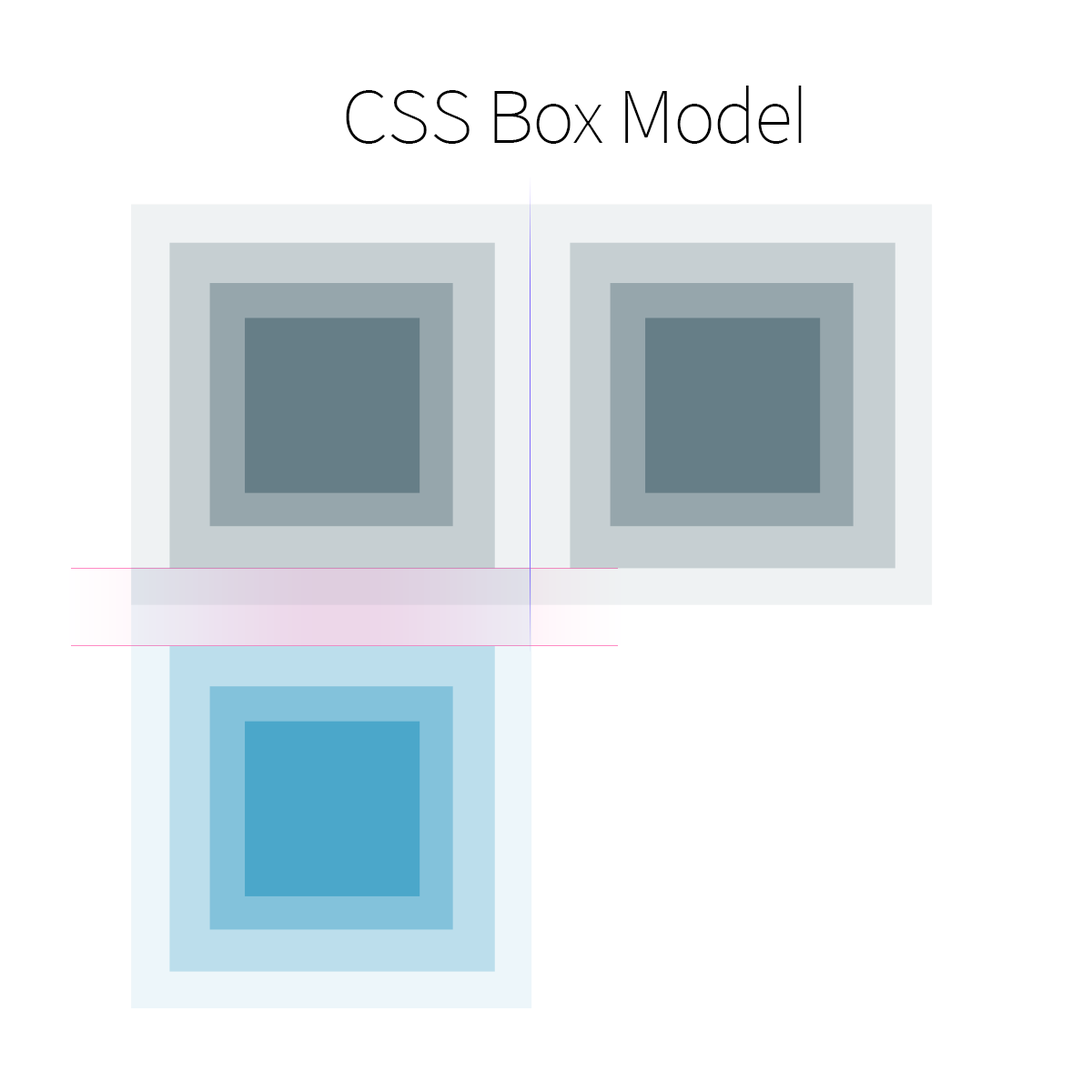
<style>
.page{position:relative;width:1092px;height:1092px;background:#ffffff}
.page>*{position:absolute;margin:0}
.t1{font:71.6px "SpoqaHanSans-Thin";letter-spacing:-0.02em;color:#000000}
</style>
<div class="page">
<p class="t1" style="left:346px;top:86px;width:456px;height:58px">CSS Box Model</p>
</div>
